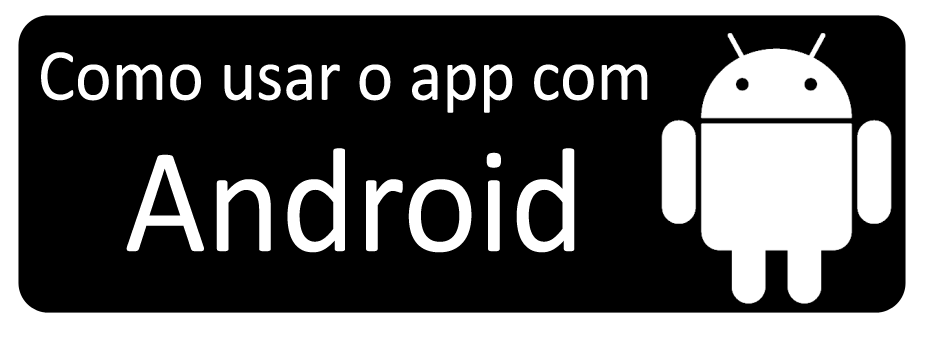
<style>
.page{position:relative;width:929px;height:341px;background:#000000}
.page>*{position:absolute;margin:0}
.t1{font:74px "Calibri";color:#ffffff;scale:0.94 1}
.t2{font:151px "Calibri";color:#ffffff;scale:0.94 1}
</style>
<div class="page">
<p class="t1" style="left:41px;top:52px;width:607px;height:61px">Como usar o app com</p>
<p class="t2" style="left:126px;top:148px;width:449px;height:105px">Android</p>
</div>
